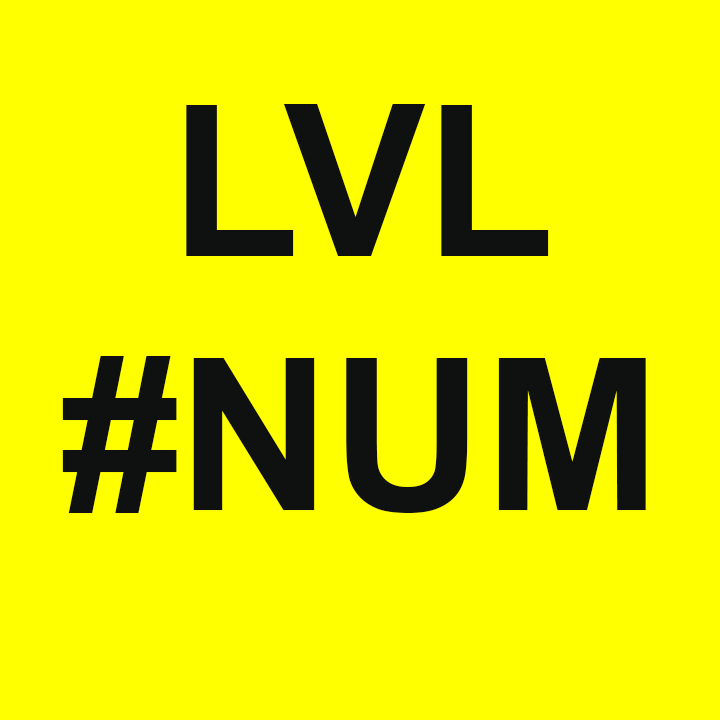
<style>
.page{position:relative;width:720px;height:720px;background:#ffff00}
.page>*{position:absolute;margin:0}
.t1{font:211.7px "Arial-BoldMT";color:#0f1010}
</style>
<div class="page">
<p class="t1" style="left:62px;top:104px;width:584px;height:409px;text-align:center">LVL #NUMBER</p>
</div>
